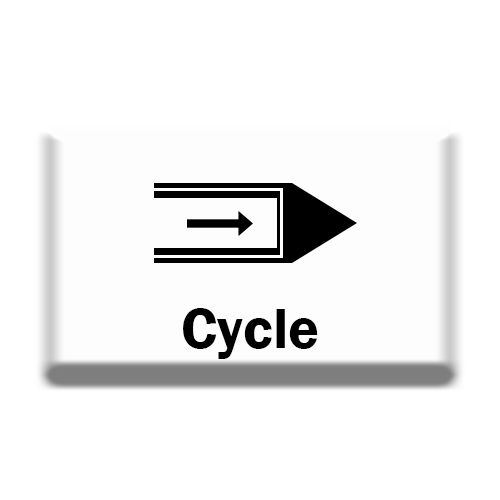
<style>
.page{position:relative;width:500px;height:500px;background:#ffffff}
.page>*{position:absolute;margin:0}
.t1{font:58.3px "FranklinGothic-Demi";color:#000000}
</style>
<div class="page">
<p class="t1" style="left:183px;top:308px;width:135px;height:51px">Cycle</p>
</div>
